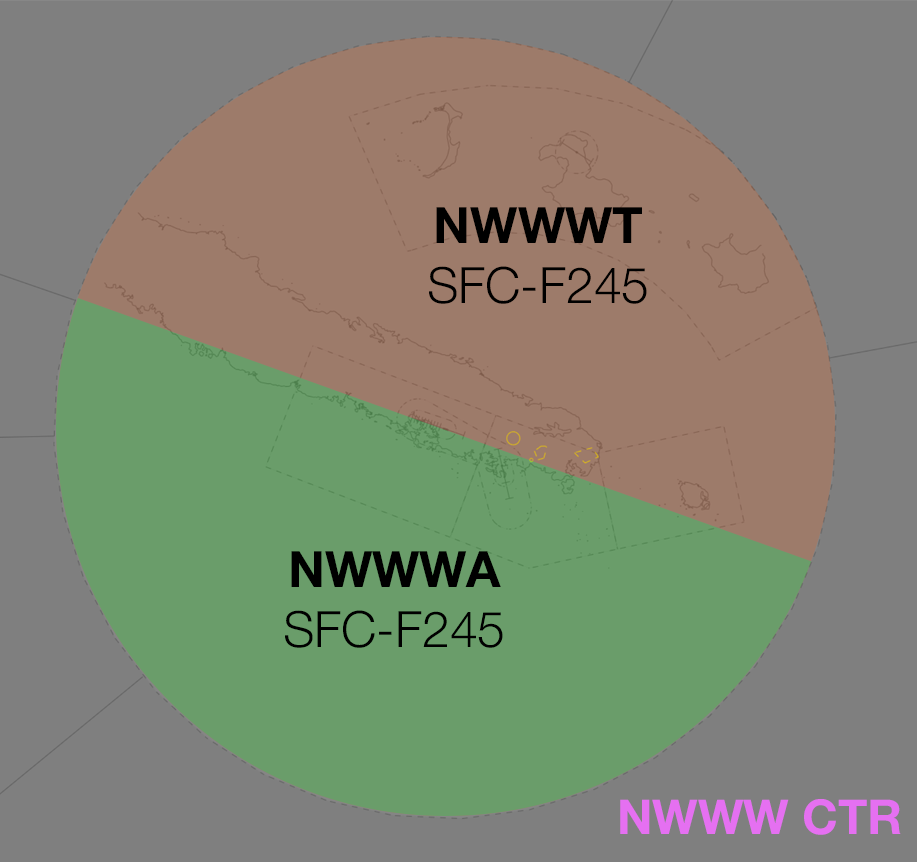
<style>
.page{position:relative;width:917px;height:862px;background:#7f7f7f}
.page>*{position:absolute;margin:0}
.t1{font:50.1px "HelveticaNeue-Light";color:#000000}
.t2{font:50.1px "HelveticaNeue-Bold";color:#000000}
.t3{font:48.2px "HelveticaNeue-Bold";color:#e570f1}
</style>
<div class="page">
<p class="t1" style="left:429px;top:207px;width:218px;height:97px;text-align:center"><span class="t2">NWWWT<br></span>SFC-F245</p>
<p class="t1" style="left:285px;top:551px;width:218px;height:97px;text-align:center"><span class="t2">NWWWA<br></span>SFC-F245</p>
<p class="t3" style="left:620px;top:799px;width:281px;height:36px">NWWW CTR</p>
</div>
